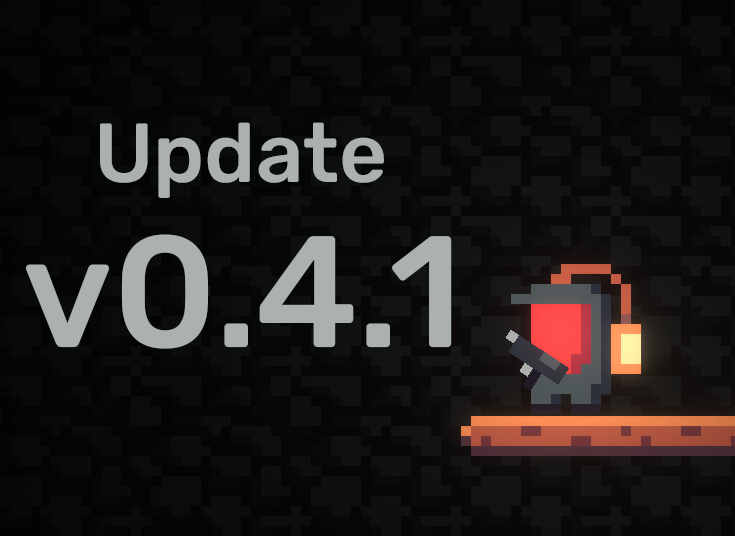
<style>
.page{position:relative;width:735px;height:536px}
.page>*{position:absolute;margin:0}
.t1{font:83.6px "Rubik-Medium";color:#abb1af}
.t2{font:158.3px "Rubik-Medium";color:#abb1af}
</style>
<div class="page">
<p class="t1" style="left:100px;top:122px;width:284px;height:76px">Update</p>
<p class="t2" style="left:25px;top:234px;width:427px;height:115px">v0.4.1</p>
</div>
